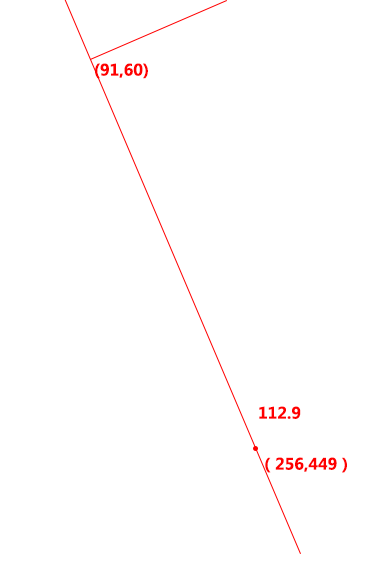
<style>
.page{position:relative;width:375px;height:582px;background:#ffffff}
.page>*{position:absolute;margin:0}
.t1{font:15.6px "MicrosoftYaHei-Bold";color:#ff0000}
</style>
<div class="page">
<p class="t1" style="left:95px;top:63px;width:53px;height:16px">(91,60)</p>
<p class="t1" style="left:259px;top:406px;width:42px;height:13px">112.9</p>
<p class="t1" style="left:265px;top:457px;width:82px;height:16px">（256,449）</p>
</div>
